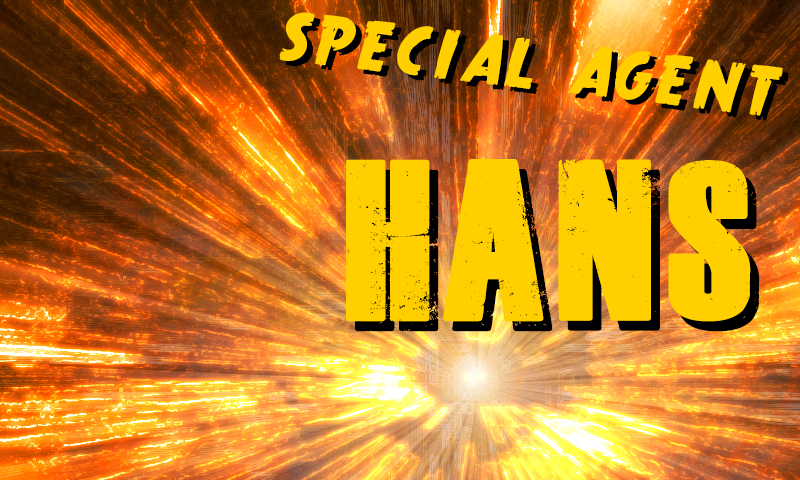
<style>
.page{position:relative;width:800px;height:480px}
.page>*{position:absolute;margin:0}
.t1{font:72px "TrueCrimes";letter-spacing:0.05em;color:#ffcf00;text-transform:uppercase}
.t2{font:158px "DeadKansas";letter-spacing:0.05em;color:#ffcf00;text-transform:uppercase}
</style>
<div class="page">
<p class="t1" style="left:279px;top:12px;width:504px;height:104px;rotate:7deg">special agent</p>
<p class="t2" style="left:346px;top:159px;width:405px;height:163px">Hans</p>
<p class="t2" style="left:355px;top:169px;width:405px;height:163px">Hans</p>
</div>
